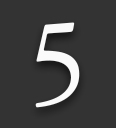
<style>
.page{position:relative;width:116px;height:128px;background:#333333}
.page>*{position:absolute;margin:0}
.t1{font:102px "KoPubWorldBatangMedium";color:#fafafa}
</style>
<div class="page">
<p class="t1" style="left:35px;top:22px;width:45px;height:86px">5</p>
</div>
